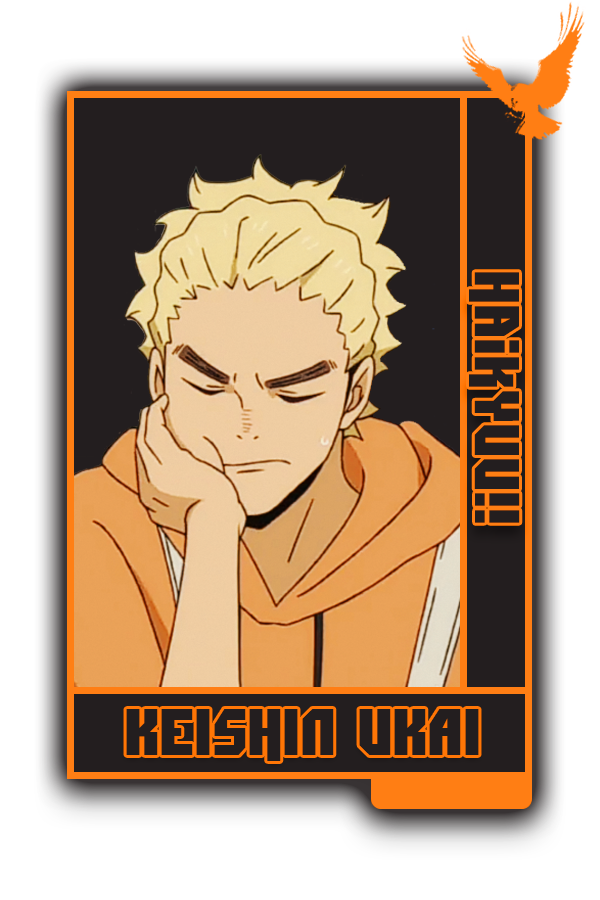
<style>
.page{position:relative;width:600px;height:900px;background:#ffffff}
.page>*{position:absolute;margin:0}
.t1{font:62.9px "Dimitri";color:#231f20}
.t2{font:65.2px "Dimitri";color:#231f20}
</style>
<div class="page">
<p class="t1" style="left:469px;top:272px;width:51px;height:251px;rotate:90deg">Haikyuu!!</p>
<p class="t2" style="left:126px;top:709px;width:353px;height:52px">KEISHIN UKAI</p>
</div>
